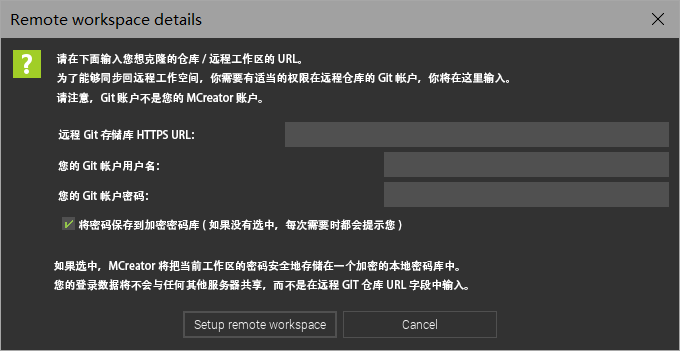
<style>
.page{position:relative;width:680px;height:351px;background:#323232}
.page>*{position:absolute;margin:0}
.t1{font:11px "AdobeHeitiStd-Regular";color:#ffffff}
</style>
<div class="page">
<p class="t1" style="left:56px;top:53px;width:453px;height:51px">请在下面输入您想克隆的仓库/远程工作区的URL。<br>为了能够同步回远程工作空间，你需要有适当的权限在远程仓库的Git帐户，你将在这里输入。<br>请注意，Git账户不是您的MCreator账户。</p>
<p class="t1" style="left:58px;top:129px;width:136px;height:11px">远程Git存储库HTTPS URL：</p>
<p class="t1" style="left:58px;top:160px;width:101px;height:11px">您的Git帐户用户名：</p>
<p class="t1" style="left:58px;top:190px;width:90px;height:11px">您的Git帐户密码：</p>
<p class="t1" style="left:78px;top:219px;width:324px;height:12px">将密码保存到加密密码库(如果没有选中，每次需要时都会提示您)</p>
<p class="t1" style="left:54px;top:260px;width:414px;height:31px">如果选中，MCreator将把当前工作区的密码安全地存储在一个加密的本地密码库中。<br>您的登录数据将不会与任何其他服务器共享，而不是在远程GlT仓库URL字段中输入。</p>
</div>
